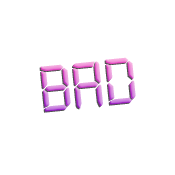
<style>
.page{position:relative;width:175px;height:175px;background:#ffffff}
.page>*{position:absolute;margin:0}
.t1{font:69px "Digital-7"}
</style>
<div class="page">
<p class="t1" style="left:40px;top:57px;width:96px;height:55px;rotate:-6deg">BAD</p>
</div>
